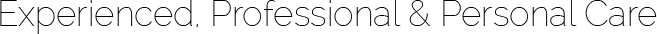
<style>
.page{position:relative;width:657px;height:34px;background:#ffffff}
.page>*{position:absolute;margin:0}
.t1{font:35px "Raleway-Thin";color:#000000}
</style>
<div class="page">
<p class="t1" style="left:0px;top:0px;width:657px;height:34px">Experienced, Professional &amp; Personal Care</p>
</div>
